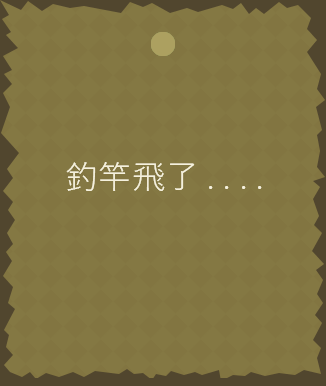
<style>
.page{position:relative;width:326px;height:386px;background:#847843}
.page>*{position:absolute;margin:0}
.t1{font:33.3px "YuGothicUI-Semilight";color:#f5f1dd}
</style>
<div class="page">
<p class="t1" style="left:66px;top:162px;width:196px;height:29px">釣竿飛了. . . .</p>
</div>
